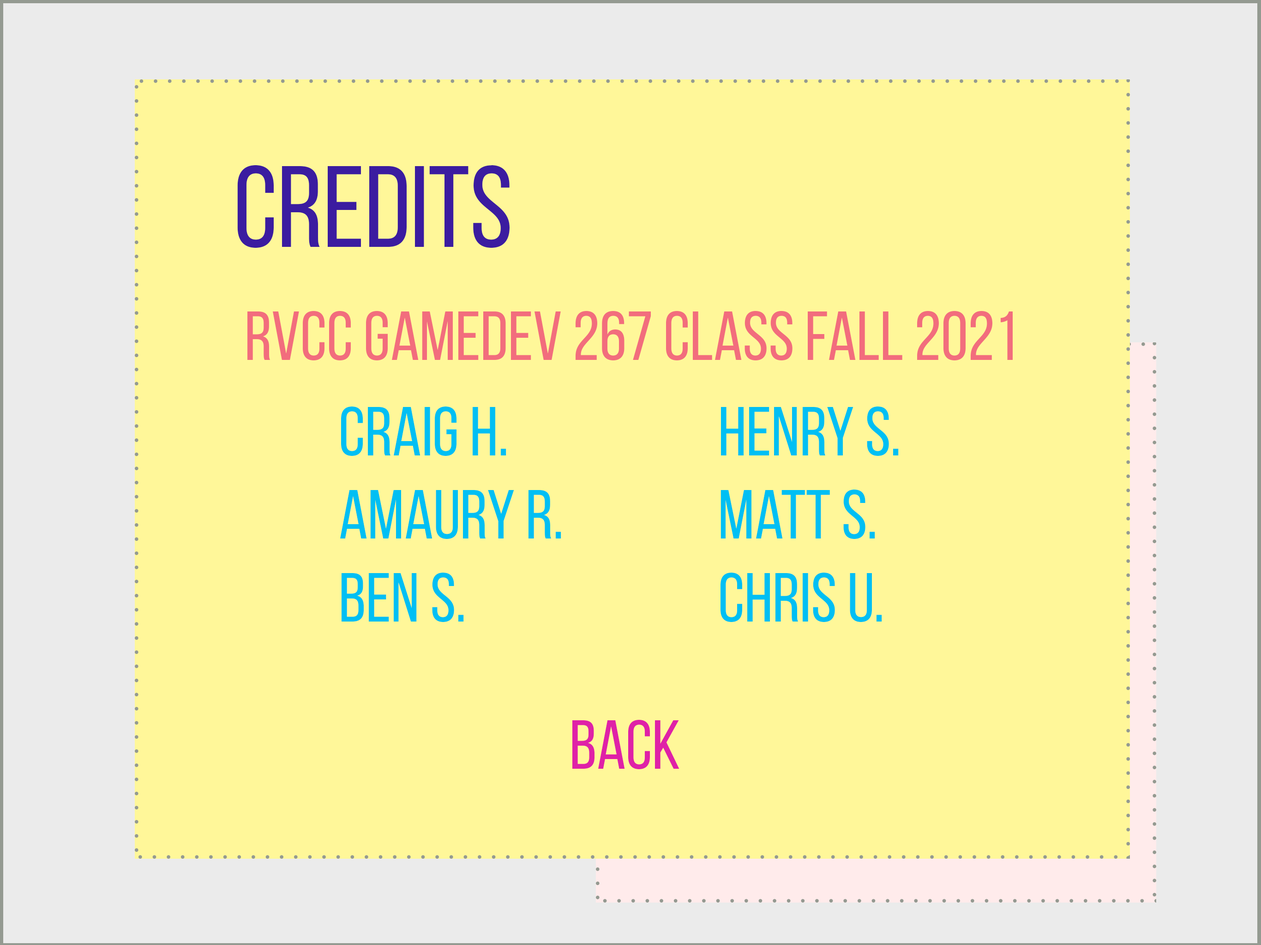
<style>
.page{position:relative;width:1261px;height:945px;background:#fff799}
.page>*{position:absolute;margin:0}
.t1{font:115.4px "BebasNeueRegular";color:#3b1ca0}
.t2{font:69.2px "BebasNeueRegular";color:#f26d7d}
.t3{font:69.2px "BebasNeueRegular";color:#00bff3}
.t4{font:69.2px "BebasNeueRegular";color:#df21a7}
</style>
<div class="page">
<p class="t1" style="left:237px;top:165px;width:273px;height:83px">Credits</p>
<p class="t2" style="left:247px;top:311px;width:766px;height:50px">RVCC GameDev 267 class fall 2021</p>
<p class="t3" style="left:340px;top:407px;width:221px;height:215px">Craig H.<br>Amaury R.<br>Ben S.</p>
<p class="t3" style="left:721px;top:406px;width:178px;height:216px">Henry S.<br>Matt S.<br>Chris U.</p>
<p class="t4" style="left:572px;top:720px;width:108px;height:50px">Back</p>
</div>
